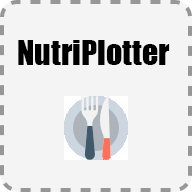
<style>
.page{position:relative;width:192px;height:192px;background:#f4f4f4}
.page>*{position:absolute;margin:0}
.t1{font:32px "Impact";color:#000000}
</style>
<div class="page">
<p class="t1" style="left:18px;top:40px;width:152px;height:25px">NutriPlotter</p>
</div>
